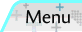
<style>
.page{position:relative;width:82px;height:32px;background:#dddddd}
.page>*{position:absolute;margin:0}
.t1{font:18.7px "Amira-Roman";color:#000000}
</style>
<div class="page">
<p class="t1" style="left:26px;top:10px;width:44px;height:14px;opacity:0.96">Menu</p>
</div>
